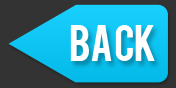
<style>
.page{position:relative;width:176px;height:88px;background:#333333}
.page>*{position:absolute;margin:0}
.t1{font:40px "Bebas";color:#ffffff}
</style>
<div class="page">
<p class="t1" style="left:70px;top:25px;width:85px;height:36px">BACK</p>
</div>
